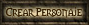
<style>
.page{position:relative;width:89px;height:25px}
.page>*{position:absolute;margin:0}
.t1{font:11px "Morpheus";color:#362002}
</style>
<div class="page">
<p class="t1" style="left:5px;top:7px;width:77px;height:11px">Crear Personaje</p>
</div>
